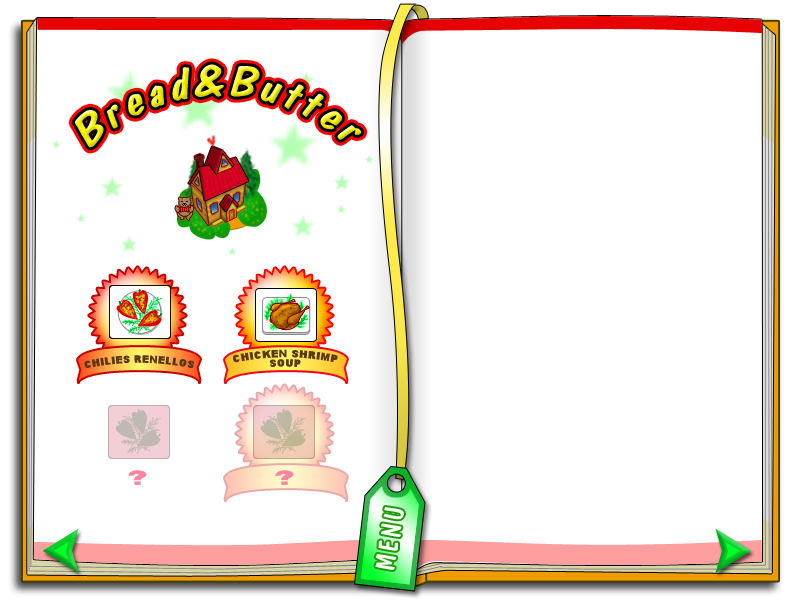
<style>
.page{position:relative;width:800px;height:600px;background:#ffffff}
.page>*{position:absolute;margin:0}
.t1{font:44.9px "DomCasualBT-Regular";letter-spacing:0.095em;font-style:italic}
.t2{font:9.4px/9.4px "Arial-Black";letter-spacing:0.045em;color:#5b3714;text-transform:uppercase}
.t3{font:9.4px "Arial-Black";letter-spacing:0.045em;color:#5b3714;text-transform:uppercase}
.t4{font:18.5px "Arial-Black";letter-spacing:0.045em;color:#ff84a1;text-transform:uppercase}
.t5{font:28.1px "DomCasualBT-Regular";letter-spacing:0.09em;color:#ffffff;font-variant:small-caps}
</style>
<div class="page">
<p class="t1" style="left:74px;top:64px;width:288px;height:84px;rotate:-1deg">Bread&amp;Butter</p>
<p class="t2" style="left:233px;top:349px;width:105px;height:18px;text-align:center">chicken shrimp<br>soup</p>
<p class="t3" style="left:84px;top:355px;width:111px;height:13px">chilies renellos</p>
<p class="t4" style="left:128px;top:470px;width:19px;height:15px">?</p>
<p class="t4" style="left:275px;top:470px;width:19px;height:15px">?</p>
<p class="t5" style="left:375px;top:507px;width:29px;height:63px;rotate:-80deg">MENU</p>
</div>
